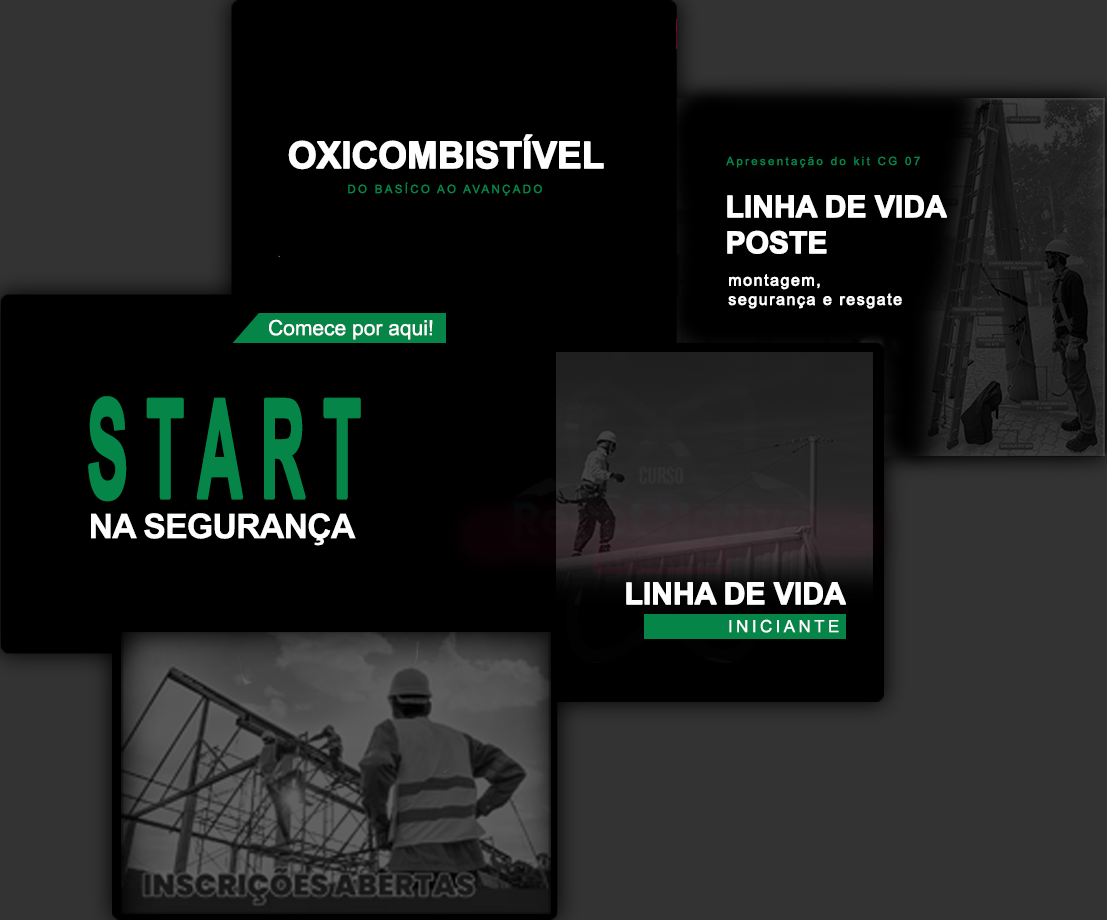
<style>
.page{position:relative;width:1107px;height:920px;background:#000000}
.page>*{position:absolute;margin:0}
.t1{font:36.9px "Arial-BoldMT";letter-spacing:-0.025em;color:#fefefe;font-weight:bold}
.t2{font:11.5px "ArialMT";letter-spacing:0.2em;color:#058648}
.t3{font:30px "Arial-BoldMT";letter-spacing:-0.025em;color:#fefefe;font-weight:bold}
.t4{font:16px "ArialMT";letter-spacing:0.07em;color:#fefefe;font-weight:bold}
.t5{font:21px "ArialMT";color:#ffffff}
.t6{font:136.6px "Arial-BoldMT";letter-spacing:0.265em;color:#058648;font-weight:bold;scale:0.45 1}
.t7{font:34px "Arial-BoldMT";letter-spacing:-0.025em;color:#fefefe}
.t8{font:17px "ArialMT";letter-spacing:0.2em;color:#ffffff}
</style>
<div class="page">
<p class="t1" style="left:288px;top:134px;width:316px;height:36px">OXICOMBISTÍVEL</p>
<p class="t2" style="left:726px;top:156px;width:194px;height:12px">Apresentação do kit CG 07</p>
<p class="t2" style="left:348px;top:182px;width:194px;height:14px">DO BASÍCO AO AVANÇADO</p>
<p class="t3" style="left:727px;top:195px;width:220px;height:59px;text-align:justify">LINHA DE VIDA<br>POSTE</p>
<p class="t4" style="left:728px;top:274px;width:174px;height:35px">montagem, <br>segurança e resgate</p>
<p class="t5" style="left:269px;top:319px;width:164px;height:21px">Comece por aqui!</p>
<p class="t6" style="left:88px;top:396px;width:273px;height:106px">START</p>
<p class="t7" style="left:91px;top:513px;width:265px;height:33px">NA SEGURANÇA</p>
<p class="t3" style="left:626px;top:582px;width:220px;height:23px">LINHA DE VIDA</p>
<p class="t8" style="left:729px;top:619px;width:110px;height:14px">INICIANTE</p>
</div>
